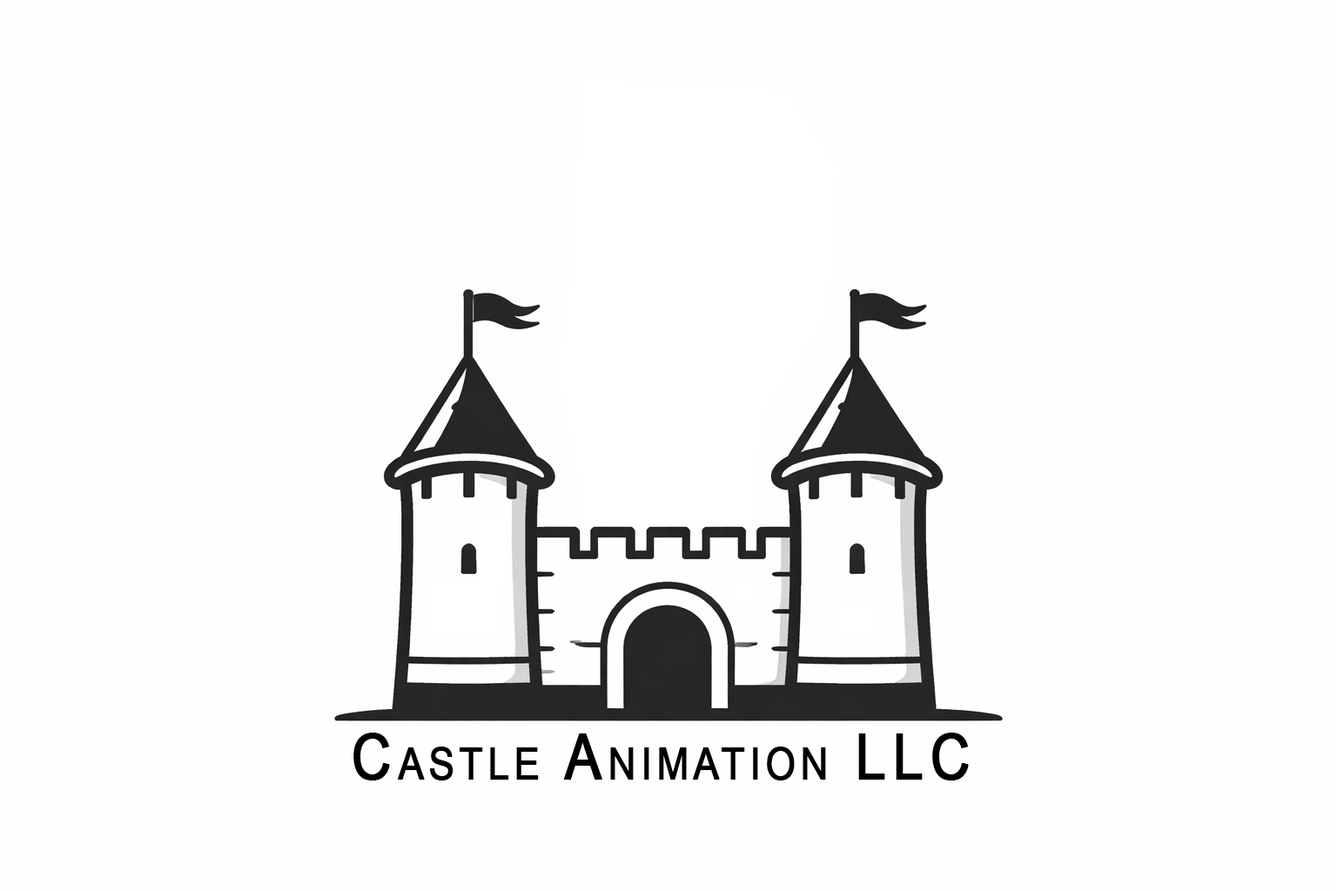
<style>
.page{position:relative;width:1337px;height:892px;background:#fefefe}
.page>*{position:absolute;margin:0}
.t1{font:62.3px "ArialMT";letter-spacing:0.1em;color:#000000;font-variant:small-caps;font-weight:bold;scale:0.88 1}
</style>
<div class="page">
<p class="t1" style="left:354px;top:732px;width:615px;height:48px">Castle Animation LLC</p>
</div>
